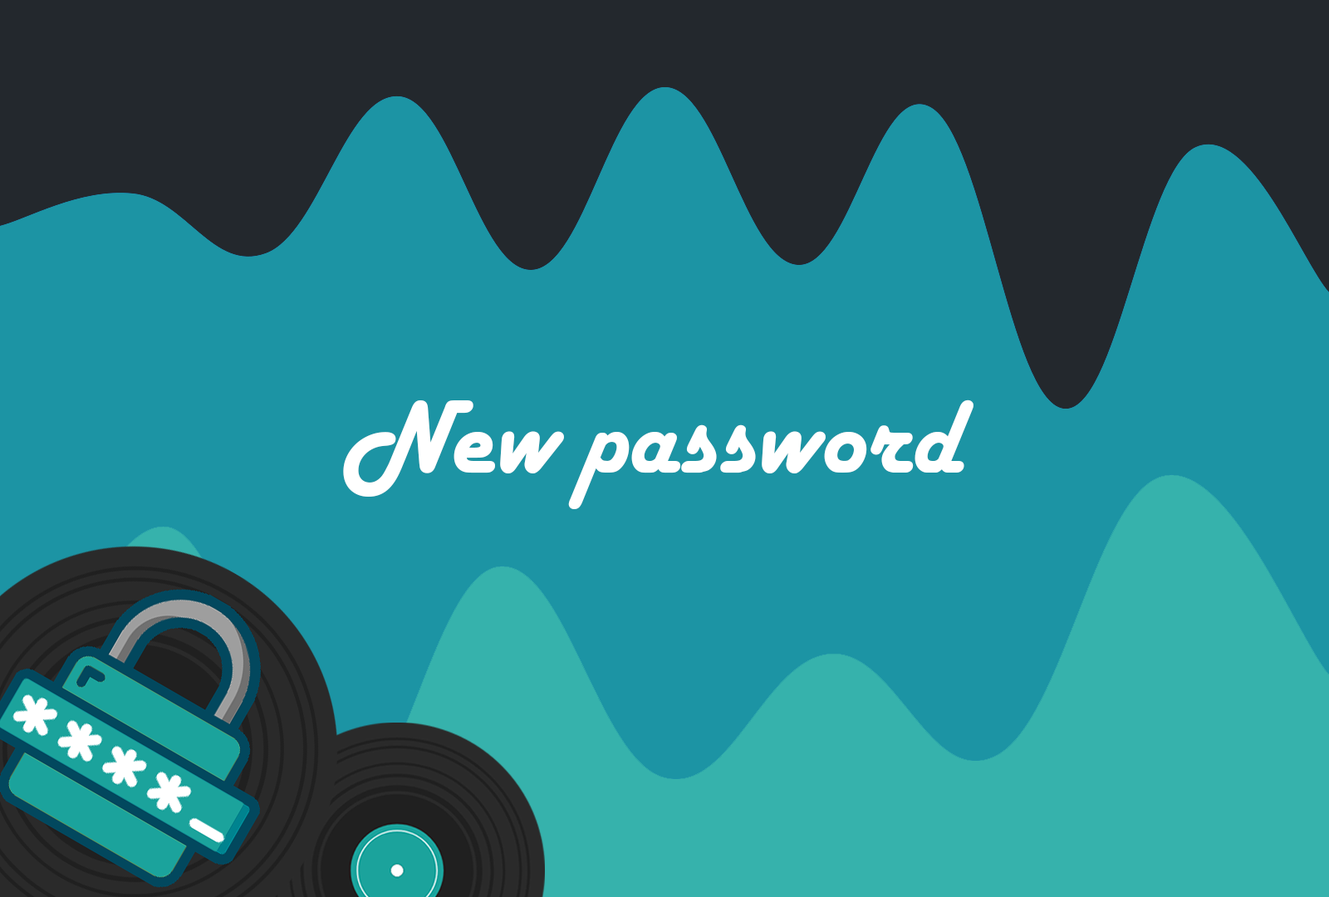
<style>
.page{position:relative;width:1329px;height:897px;background:#1c94a4}
.page>*{position:absolute;margin:0}
.t1{font:108px "HarlowSolidPlain";color:#ffffff}
</style>
<div class="page">
<p class="t1" style="left:343px;top:400px;width:631px;height:109px">New password</p>
</div>
